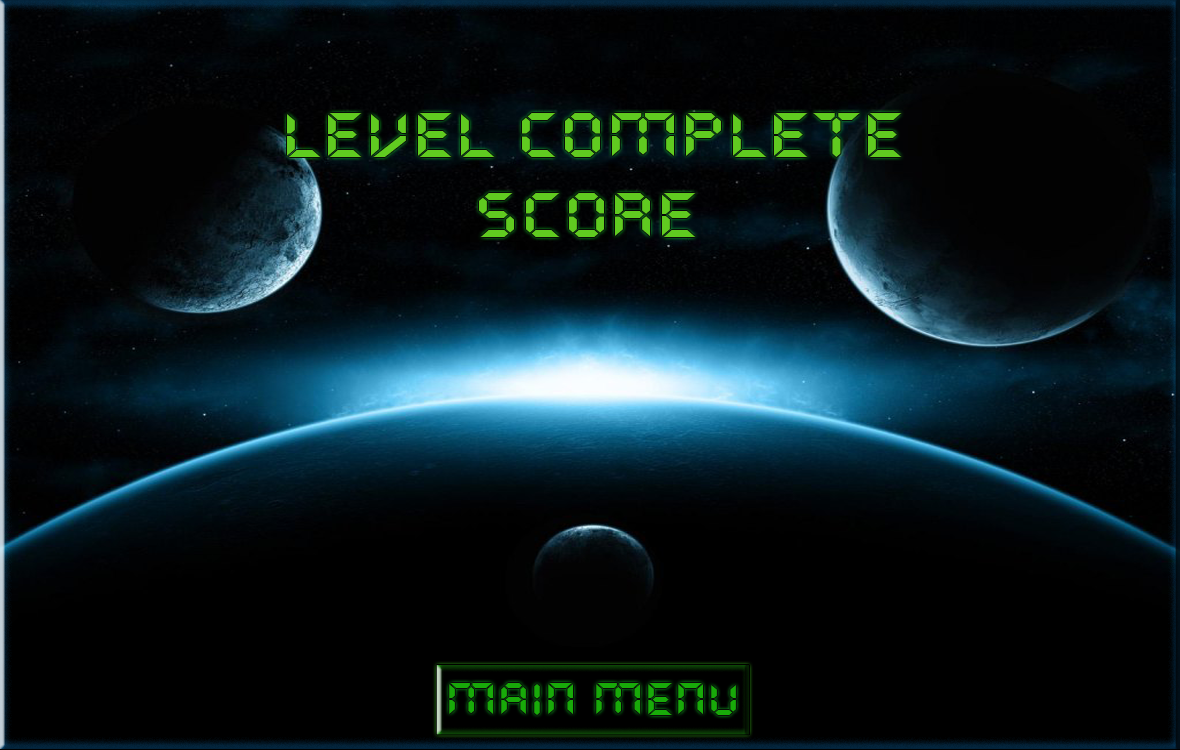
<style>
.page{position:relative;width:1180px;height:750px;background:#000000}
.page>*{position:absolute;margin:0}
.t1{font:63.5px "QuartzMS";color:#60cb20;scale:1.18 1}
.t2{font:44.9px "QuartzMS";color:#18aa09;scale:1.18 1}
</style>
<div class="page">
<p class="t1" style="left:287px;top:113px;width:615px;height:44px">Level complete</p>
<p class="t1" style="left:479px;top:193px;width:217px;height:44px">Score</p>
<p class="t2" style="left:449px;top:683px;width:287px;height:32px">Main menu</p>
</div>
